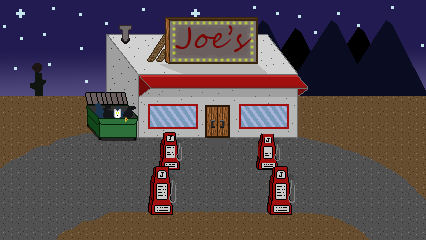
<style>
.page{position:relative;width:426px;height:240px;background:#525252}
.page>*{position:absolute;margin:0}
.t1{font:30px "SegoeScript";color:#7a0202}
</style>
<div class="page">
<p class="t1" style="left:175px;top:25px;width:77px;height:27px">Joe’s</p>
</div>
